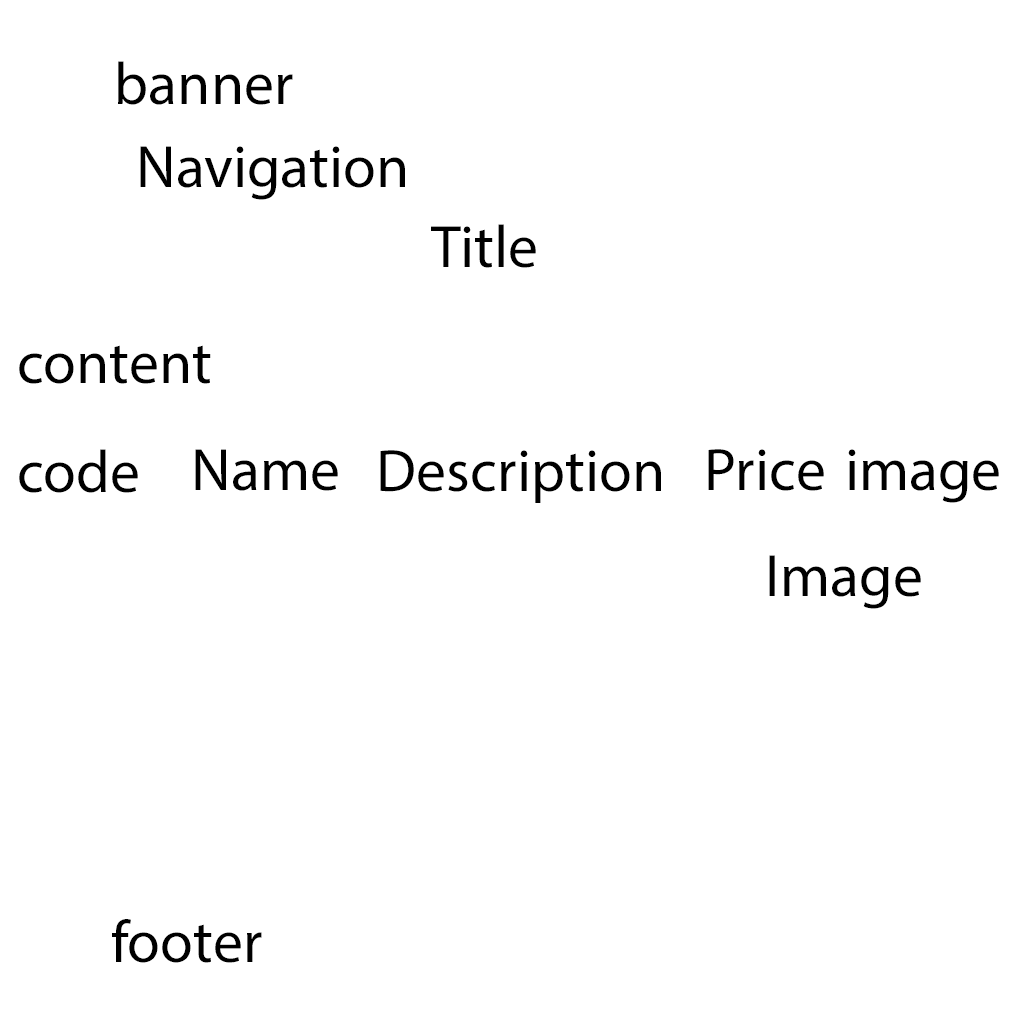
<style>
.page{position:relative;width:1024px;height:1024px;background:#ffffff}
.page>*{position:absolute;margin:0}
.t1{font:60px "MyriadPro-Regular";color:#000000}
</style>
<div class="page">
<p class="t1" style="left:118px;top:61px;width:175px;height:44px">banner</p>
<p class="t1" style="left:140px;top:146px;width:265px;height:54px">Navigation</p>
<p class="t1" style="left:431px;top:224px;width:105px;height:44px">Title</p>
<p class="t1" style="left:19px;top:345px;width:192px;height:39px">content</p>
<p class="t1" style="left:19px;top:449px;width:119px;height:44px">code</p>
<p class="t1" style="left:195px;top:449px;width:143px;height:42px">Name</p>
<p class="t1" style="left:708px;top:449px;width:116px;height:42px">Price</p>
<p class="t1" style="left:848px;top:449px;width:151px;height:54px">image</p>
<p class="t1" style="left:380px;top:450px;width:281px;height:53px">Description</p>
<p class="t1" style="left:769px;top:555px;width:152px;height:54px">Image</p>
<p class="t1" style="left:112px;top:919px;width:150px;height:44px">footer</p>
</div>
